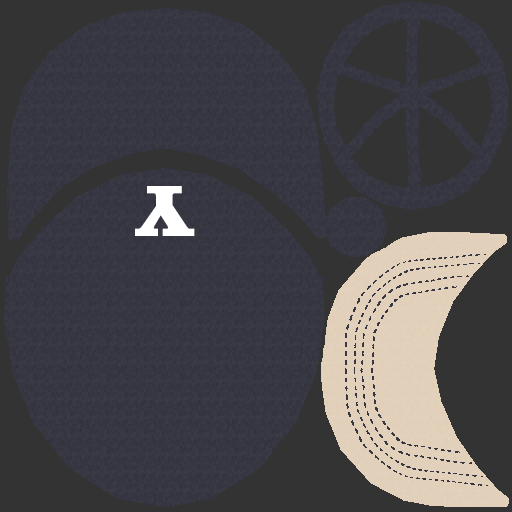
<style>
.page{position:relative;width:512px;height:512px;background:#333333}
.page>*{position:absolute;margin:0}
.t1{font:69.3px "Clarendon";color:#ffffff}
</style>
<div class="page">
<p class="t1" style="left:135px;top:186px;width:60px;height:50px;rotate:180deg">Y</p>
</div>
